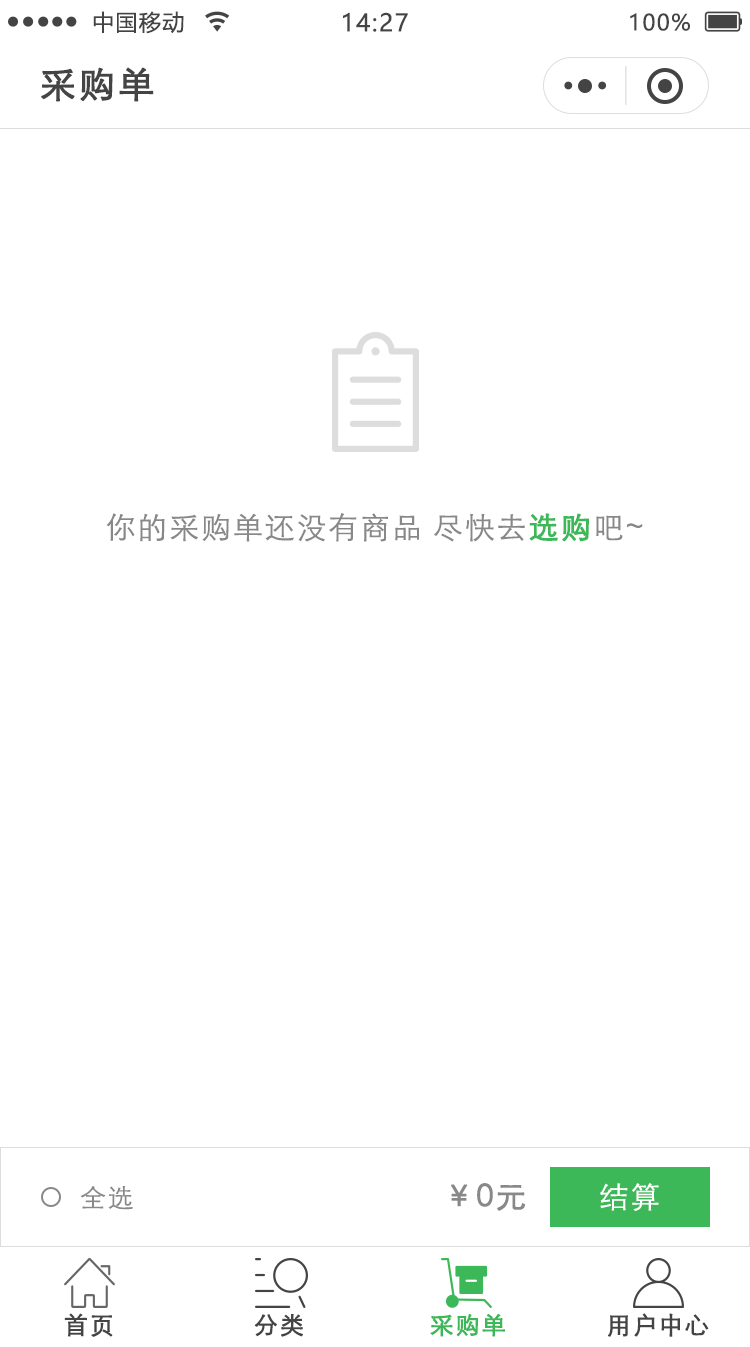
<style>
.page{position:relative;width:750px;height:1347px;background:#ffffff}
.page>*{position:absolute;margin:0}
.t1{font:22px "MicrosoftYaHei";letter-spacing:0.06em;color:#444444}
.t2{font:24px "MicrosoftYaHei";letter-spacing:0.06em;color:#444444}
.t3{font:36px "STXihei";letter-spacing:0.06em;color:#444444;font-weight:bold}
.t4{font:30px "STXihei";letter-spacing:0.06em;color:#888888}
.t5{font:30px "STXihei";letter-spacing:0.06em;color:#3db858;font-weight:bold}
.t6{font:26px "STXihei";letter-spacing:0.06em;color:#888888}
.t7{font:30px "STXihei";letter-spacing:0.06em;color:#888888;font-weight:bold}
.t8{font:29.9px "STXihei";letter-spacing:0.06em;color:#ffffff}
.t9{font:23.9px "STXihei";letter-spacing:0.06em;color:#444444;font-weight:bold}
.t10{font:23.9px "STXihei";letter-spacing:0.06em;color:#3db858;font-weight:bold}
</style>
<div class="page">
<p class="t1" style="left:93px;top:11px;width:91px;height:23px">中国移动</p>
<p class="t2" style="left:343px;top:12px;width:65px;height:20px">14:27</p>
<p class="t1" style="left:630px;top:13px;width:60px;height:18px">100%</p>
<p class="t3" style="left:41px;top:67px;width:113px;height:35px">采购单</p>
<p class="t4" style="left:106px;top:513px;width:537px;height:29px">你的采购单还没有商品 尽快去<span class="t5">选购</span>吧~</p>
<p class="t6" style="left:80px;top:1186px;width:53px;height:24px">全选</p>
<p class="t7" style="left:451px;top:1183px;width:75px;height:28px">￥0元</p>
<p class="t8" style="left:600px;top:1183px;width:59px;height:28px">结算</p>
<p class="t9" style="left:64px;top:1313px;width:49px;height:24px">首页</p>
<p class="t10" style="left:430px;top:1313px;width:75px;height:24px">采购单</p>
<p class="t9" style="left:608px;top:1313px;width:101px;height:24px">用户中心</p>
<p class="t9" style="left:254px;top:1314px;width:49px;height:23px">分类</p>
</div>
